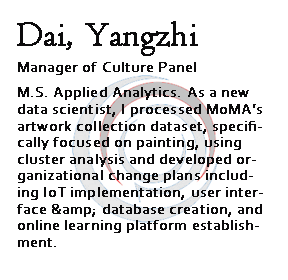
<style>
.page{position:relative;width:288px;height:280px;background:#ffffff}
.page>*{position:absolute;margin:0}
.t1{font:35px "Centaur";letter-spacing:0.005em;color:#0c0b0c;font-weight:bold}
.t2{font:15px "Corbel";letter-spacing:0.005em;color:#0c0b0c;font-weight:bold}
.t3{font:15px/16.6px "Corbel";letter-spacing:0.005em;color:#0c0b0c;font-weight:bold}
</style>
<div class="page">
<p class="t1" style="left:17px;top:21px;width:181px;height:35px">Dai, Yangzhi</p>
<p class="t2" style="left:18px;top:62px;width:178px;height:13px">Manager of Culture Panel</p>
<p class="t3" style="left:17px;top:87px;width:246px;height:160px">M.S. Applied Analytics. As a new data scientist, I processed MoMA’s artwork collection dataset, specifically focused on painting, using cluster analysis and developed organizational change plans including IoT implementation, user interface &amp;amp; database creation, and online learning platform establishment.</p>
</div>
